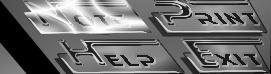
<style>
.page{position:relative;width:271px;height:74px}
.page>*{position:absolute;margin:0}
.t1{font:20px "Ethnocentric";letter-spacing:0.2em;scale:0.77 1}
.t2{font:20px "Ethnocentric";letter-spacing:0.3em;scale:0.77 1}
.t3{font:20px "Ethnocentric";letter-spacing:0.2em;color:#1d1d1d;scale:0.77 1}
.t4{font:20px "Ethnocentric";letter-spacing:0.2em;color:#1a1a1a;scale:0.77 1}
</style>
<div class="page">
<p class="t1" style="left:74px;top:15px;width:55px;height:11px">o<span class="t2">t</span>e</p>
<p class="t3" style="left:195px;top:13px;width:63px;height:11px">RINT</p>
<p class="t4" style="left:214px;top:54px;width:46px;height:11px">XIT</p>
<p class="t4" style="left:104px;top:55px;width:50px;height:11px">ELP</p>
</div>
